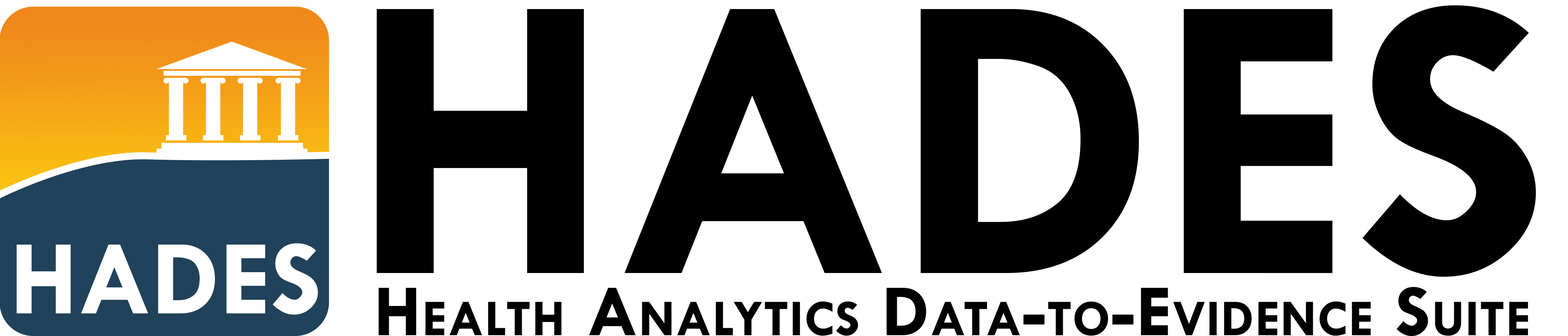
<style>
.page{position:relative;width:1568px;height:336px;background:#ffffff}
.page>*{position:absolute;margin:0}
.t1{font:411.8px "TwCenMT-Bold";color:#000000}
.t2{font:107.1px "TwCenMT-Bold";color:#ffffff}
.t3{font:74.1px "TwCenMT-Bold";letter-spacing:0.016em;color:#000000;font-variant:small-caps}
</style>
<div class="page">
<p class="t1" style="left:376px;top:5px;width:1160px;height:272px">HADES</p>
<p class="t2" style="left:16px;top:243px;width:302px;height:72px">HADES</p>
<p class="t3" style="left:378px;top:287px;width:1150px;height:49px">Health Analytics Data-to-Evidence Suite</p>
</div>
